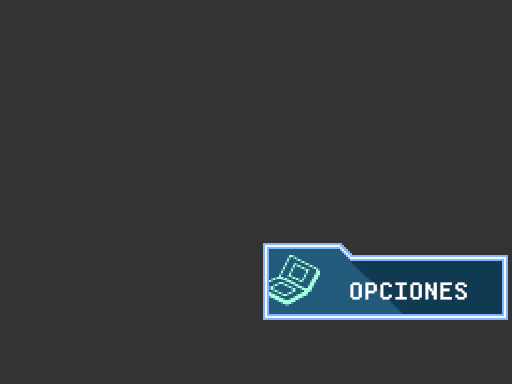
<style>
.page{position:relative;width:512px;height:384px;background:#333333}
.page>*{position:absolute;margin:0}
.t1{font:25px "Power-Red-and-Green";letter-spacing:0.075em;color:#ffffff;font-weight:bold}
</style>
<div class="page">
<p class="t1" style="left:350px;top:282px;width:117px;height:18px">OPCIONES</p>
</div>
